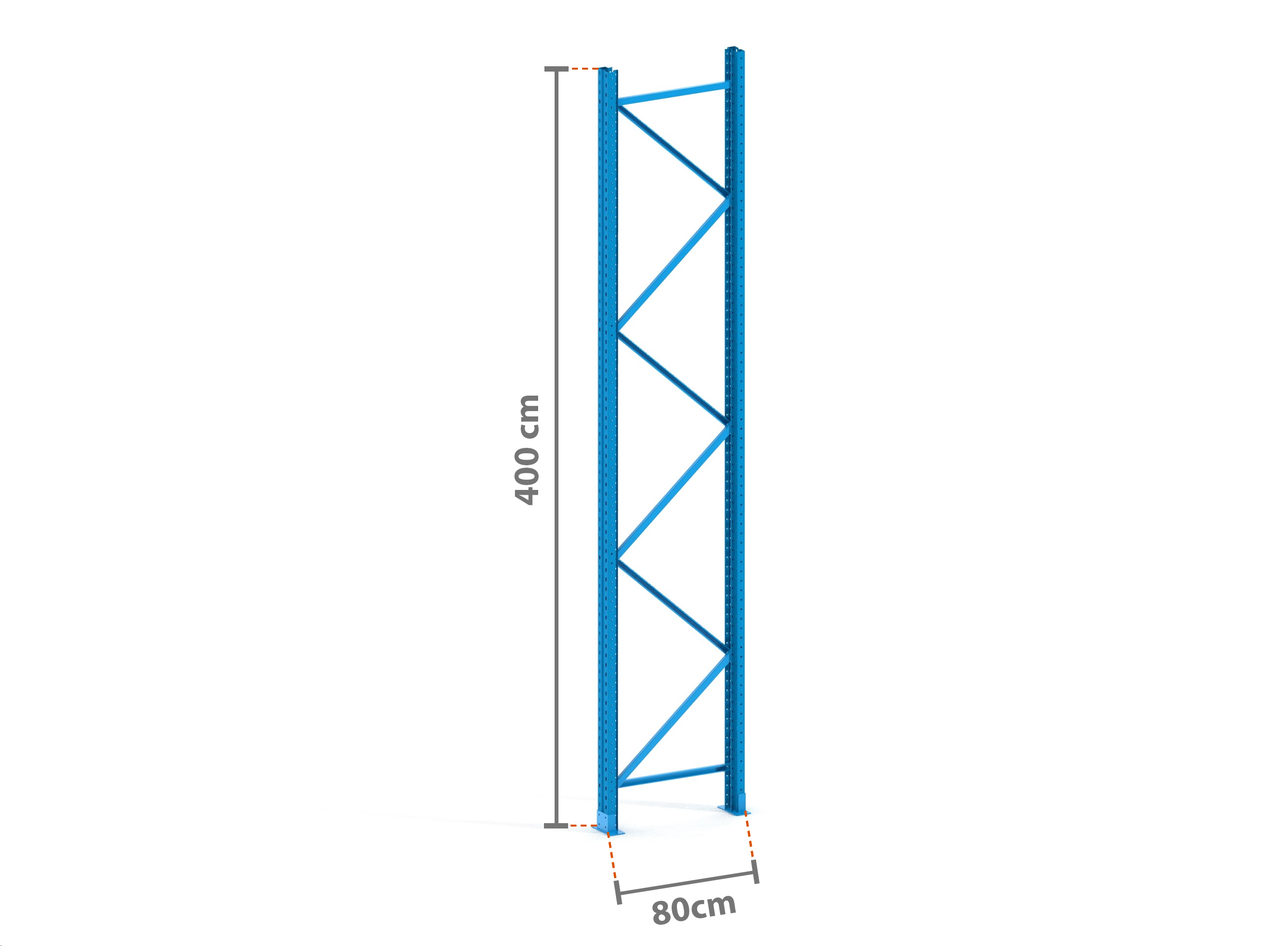
<style>
.page{position:relative;width:1261px;height:946px;background:#ffffff}
.page>*{position:absolute;margin:0}
.t1{font:35.5px "MyriadPro-Bold";color:#757575}
</style>
<div class="page">
<p class="t1" style="left:514px;top:395px;width:25px;height:110px;rotate:-90deg">400 cm</p>
<p class="t1" style="left:652px;top:895px;width:84px;height:29px;rotate:-9deg">80cm</p>
</div>
